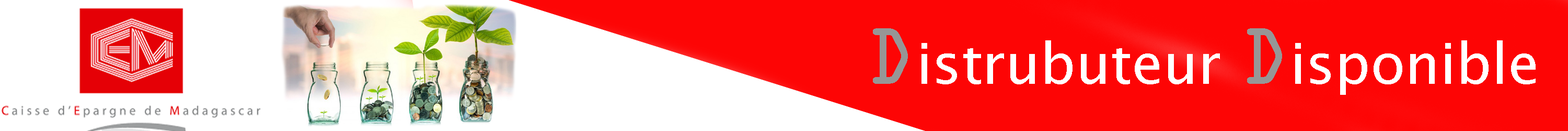
<style>
.page{position:relative;width:1568px;height:131px;background:#fd0505}
.page>*{position:absolute;margin:0}
.t1{font:56.3px "LucidaSans";color:#ffffff}
.t2{font:71.5px "OCRAStd";color:#979696}
</style>
<div class="page">
<p class="t1" style="left:873px;top:28px;width:663px;height:67px"><span class="t2">D</span>istrubuteur <span class="t2">D</span>isponible</p>
</div>
